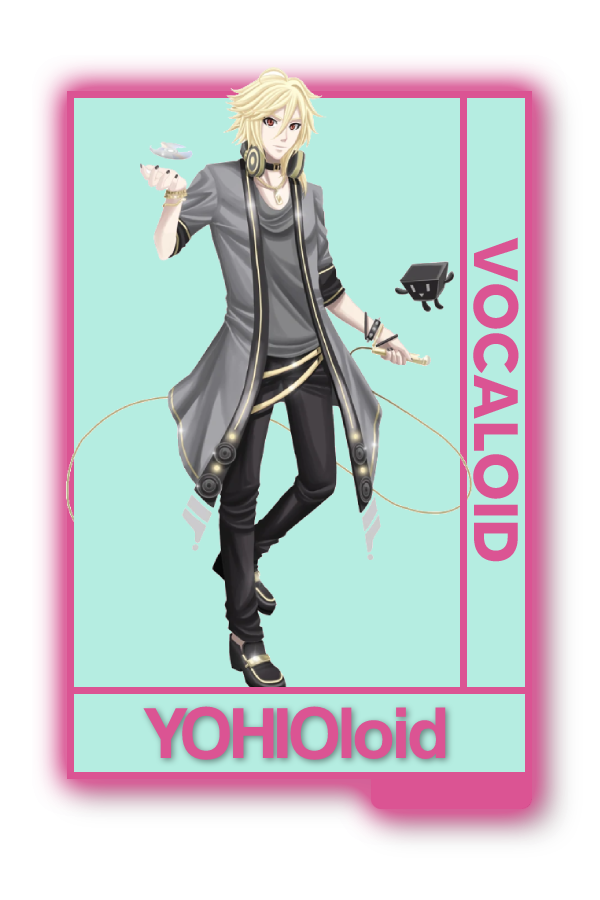
<style>
.page{position:relative;width:600px;height:900px;background:#b5ede1}
.page>*{position:absolute;margin:0}
.t1{font:62.5px "MADETOMMY-Bold";color:#db5493}
.t2{font:75px "CoolveticaRg-Regular";color:#db5493}
</style>
<div class="page">
<p class="t1" style="left:473px;top:237px;width:46px;height:325px;rotate:90deg">VOCALOID</p>
<p class="t2" style="left:143px;top:706px;width:303px;height:54px">YOHIOloid</p>
</div>
